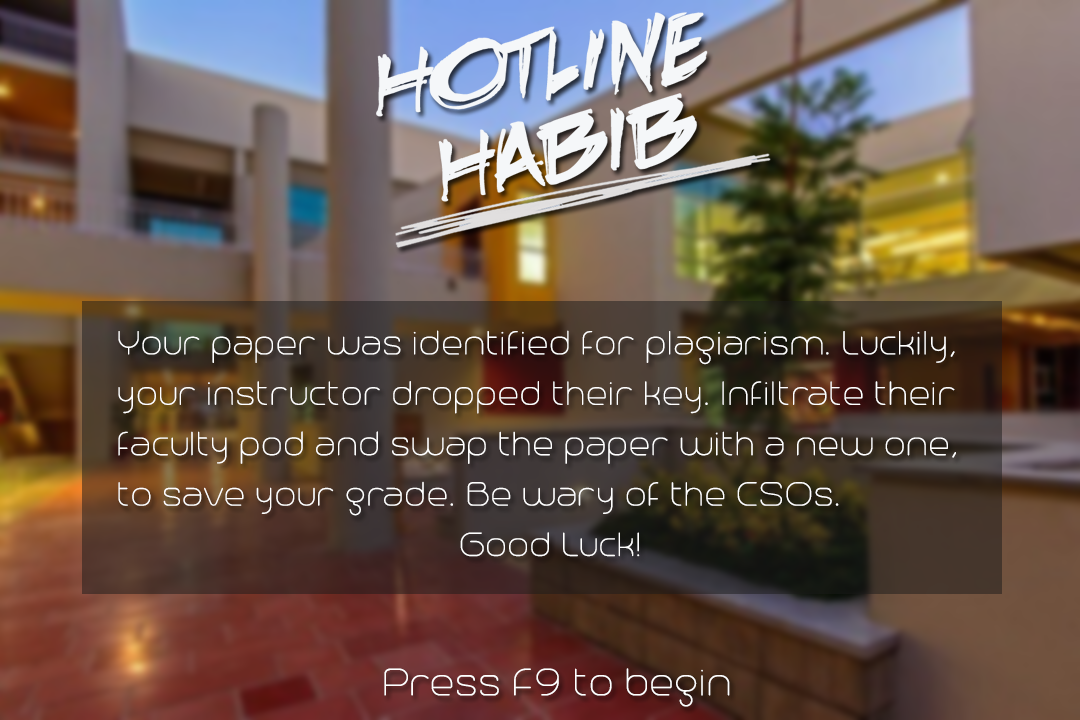
<style>
.page{position:relative;width:1080px;height:720px}
.page>*{position:absolute;margin:0}
.t1{font:42px "Trench-Thin";color:#ffffff}
.t2{font:48px "Trench-Thin";color:#ffffff}
</style>
<div class="page">
<p class="t1" style="left:118px;top:330px;width:838px;height:227px">Your paper was identified for plagiarism. Luckily,<br>your instructor dropped their key. Infiltrate their<br>faculty pod and swap the paper with a new one,<br>to save your grade. Be wary of the CSOs.<br>                               Good Luck!</p>
<p class="t2" style="left:384px;top:668px;width:346px;height:39px">Press F9 to begin</p>
</div>
